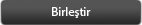
<style>
.page{position:relative;width:142px;height:25px;background:#545454}
.page>*{position:absolute;margin:0}
.t1{font:12.5px "MyriadPro-Regular";color:#ffffff}
</style>
<div class="page">
<p class="t1" style="left:52px;top:7px;width:39px;height:11px">Birleştir</p>
</div>
